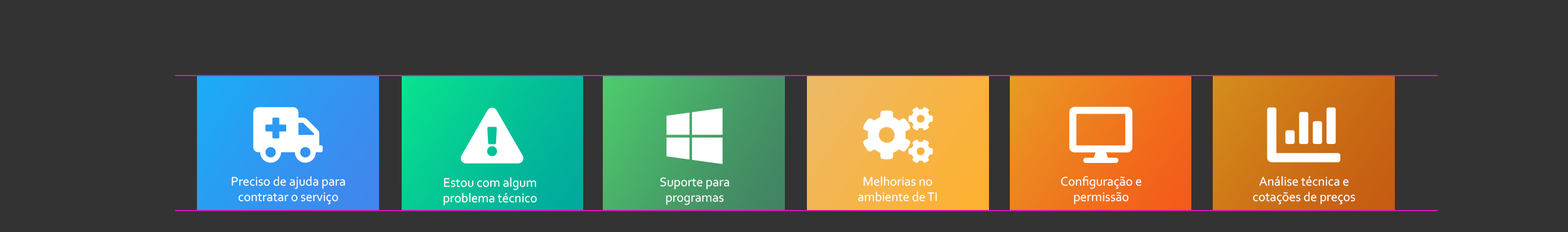
<style>
.page{position:relative;width:1568px;height:232px;background:#333333}
.page>*{position:absolute;margin:0}
.t1{font:13.1px "Corbel";color:#ffffff}
</style>
<div class="page">
<p class="t1" style="left:231px;top:176px;width:114px;height:29px;text-align:center">Preciso de ajuda para <br>contratar o serviço</p>
<p class="t1" style="left:443px;top:177px;width:94px;height:29px;text-align:center">Estou com algum <br>problema técnico</p>
<p class="t1" style="left:660px;top:177px;width:70px;height:28px;text-align:center">Suporte para <br>programas <br>e arquivos</p>
<p class="t1" style="left:858px;top:176px;width:79px;height:26px;text-align:center">Melhorias no <br>ambiente de TI</p>
<p class="t1" style="left:1061px;top:176px;width:80px;height:29px;text-align:center">Configuração e <br>permissão <br>de acessos</p>
<p class="t1" style="left:1253px;top:176px;width:103px;height:29px;text-align:center">Análise técnica e <br>cotações de preços</p>
</div>
